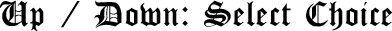
<style>
.page{position:relative;width:392px;height:31px;background:#ffffff}
.page>*{position:absolute;margin:0}
.t1{font:36.7px "CloisterBlack-Light";color:#000000}
</style>
<div class="page">
<p class="t1" style="left:0px;top:0px;width:392px;height:31px">Up / Down: Select Choice</p>
</div>
